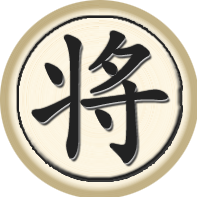
<style>
.page{position:relative;width:197px;height:197px}
.page>*{position:absolute;margin:0}
.t1{font:150px "AdobeKaitiStd-Regular";color:#222222}
</style>
<div class="page">
<p class="t1" style="left:32px;top:31px;width:136px;height:132px">将</p>
</div>
